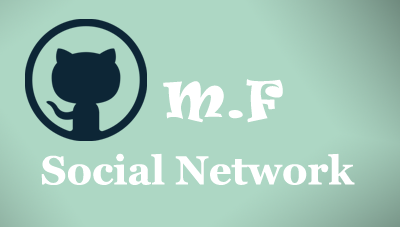
<style>
.page{position:relative;width:400px;height:227px;background:#add7c4}
.page>*{position:absolute;margin:0}
.t1{font:48.1px "Ravie";color:#ffffff}
.t2{font:40.1px "Vani-Bold";color:#ffffff}
</style>
<div class="page">
<p class="t1" style="left:163px;top:79px;width:120px;height:44px">M.F</p>
<p class="t2" style="left:41px;top:153px;width:314px;height:32px">Social Network</p>
</div>
